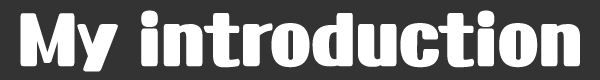
<style>
.page{position:relative;width:600px;height:80px;background:#333333}
.page>*{position:absolute;margin:0}
.t1{font:60px "KoreanBRSG-R";color:#ffffff;font-weight:bold}
</style>
<div class="page">
<p class="t1" style="left:20px;top:10px;width:560px;height:62px">My introduction</p>
</div>
